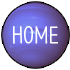
<style>
.page{position:relative;width:70px;height:70px;background:#ffffff}
.page>*{position:absolute;margin:0}
.t1{font:22px "NanumBarunpenOTF";color:#ffffff}
</style>
<div class="page">
<p class="t1" style="left:13px;top:26px;width:45px;height:18px">HOME</p>
</div>
